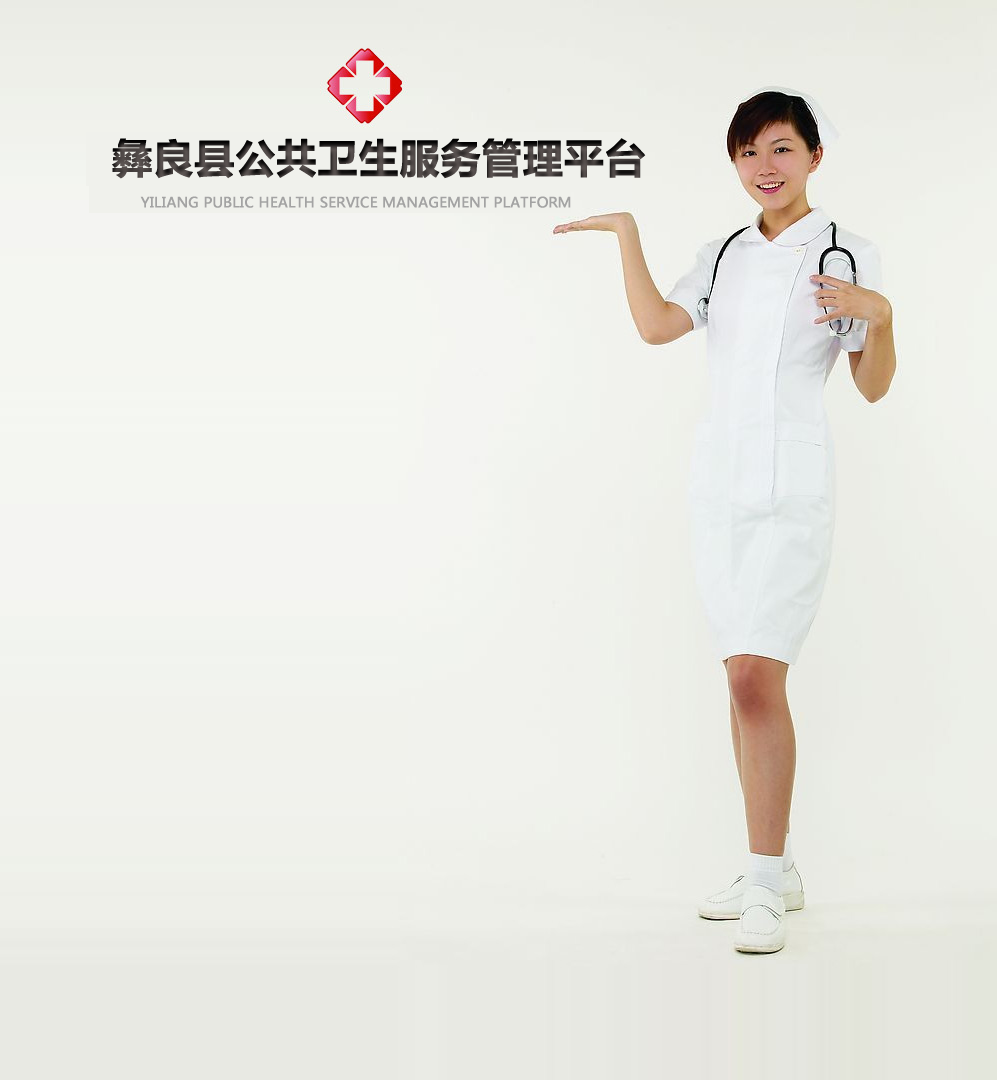
<style>
.page{position:relative;width:997px;height:1080px}
.page>*{position:absolute;margin:0}
.t1{font:40px "MicrosoftYaHei-Bold";font-weight:bold}
.t2{font:14px "MicrosoftYaHei";color:#a3a3a3;font-weight:bold}
</style>
<div class="page">
<p class="t1" style="left:112px;top:138px;width:534px;height:41px">彝良县公共卫生服务管理平台</p>
<p class="t2" style="left:140px;top:196px;width:431px;height:12px">YILIANG PUBLIC HEALTH SERVICE MANAGEMENT PLATFORM</p>
</div>
